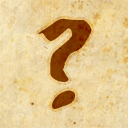
<style>
.page{position:relative;width:128px;height:128px}
.page>*{position:absolute;margin:0}
.t1{font:173.8px "TreasureMapDeadhand";color:#7e3600}
</style>
<div class="page">
<p class="t1" style="left:38px;top:19px;width:54px;height:90px">?</p>
</div>
